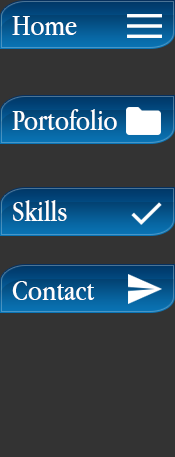
<style>
.page{position:relative;width:175px;height:457px;background:#333333}
.page>*{position:absolute;margin:0}
.t1{font:30px "AppleGaramond";color:#fefefe}
</style>
<div class="page">
<p class="t1" style="left:12px;top:16px;width:65px;height:19px">Home</p>
<p class="t1" style="left:12px;top:109px;width:105px;height:21px">Portofolio</p>
<p class="t1" style="left:13px;top:200px;width:54px;height:21px">Skills</p>
<p class="t1" style="left:12px;top:281px;width:83px;height:19px">Contact</p>
</div>
